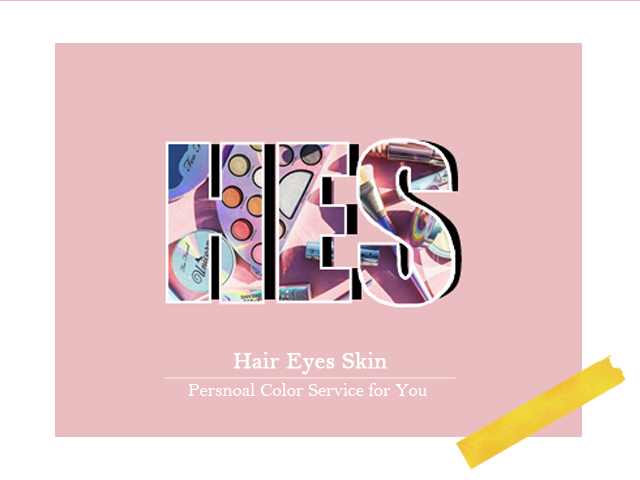
<style>
.page{position:relative;width:640px;height:480px;background:#eabec1}
.page>*{position:absolute;margin:0}
.t1{font:23.6px "BellMT";color:#ffffff;font-weight:bold}
.t2{font:18.8px "BellMT";color:#ffffff}
</style>
<div class="page">
<p class="t1" style="left:233px;top:352px;width:154px;height:23px">Hair Eyes Skin</p>
<p class="t2" style="left:188px;top:383px;width:239px;height:13px">Persnoal Color Service for You</p>
</div>
